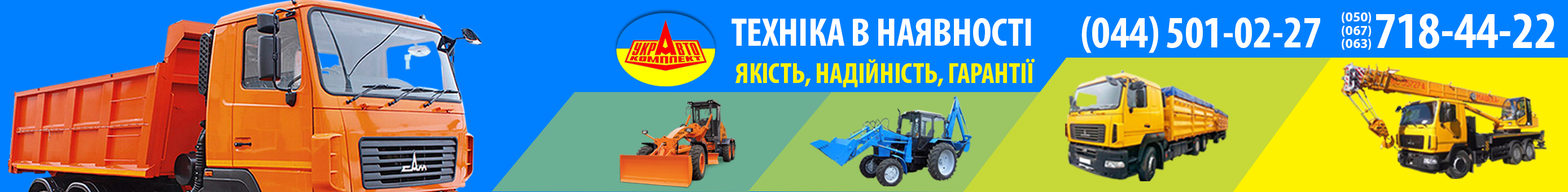
<style>
.page{position:relative;width:1568px;height:192px;background:#0080ff}
.page>*{position:absolute;margin:0}
.t1{font:44.8px "MyriadPro-BoldCond";letter-spacing:-0.01em;color:#fefefe}
.t2{font:13.5px "MyriadPro-Bold";color:#fdfcfc}
.t3{font:13.5px "MyriadPro-Bold";color:#ffffff}
.t4{font:52.1px "MyriadPro-BoldCond";letter-spacing:-0.01em;color:#ffffff}
.t5{font:40.4px "MyriadPro-BoldCond";letter-spacing:-0.01em;color:#ffffff}
.t6{font:28.7px "MyriadPro-BoldCond";letter-spacing:-0.01em;color:#fff200}
</style>
<div class="page">
<p class="t1" style="left:1081px;top:16px;width:239px;height:37px">(044) 501-02-27</p>
<p class="t2" style="left:1342px;top:12px;width:29px;height:11px">(050<span class="t3">)</span></p>
<p class="t4" style="left:1376px;top:14px;width:178px;height:35px">718-44-22</p>
<p class="t5" style="left:732px;top:18px;width:299px;height:28px">ТЕХНІКА В НАЯВНОСТІ</p>
<p class="t3" style="left:1342px;top:25px;width:29px;height:12px">(067)</p>
<p class="t3" style="left:1342px;top:38px;width:29px;height:12px">(063)</p>
<p class="t6" style="left:735px;top:59px;width:300px;height:28px">ЯКІСТЬ, НАДІЙНІСТЬ, ГАРАНТІЇ</p>
</div>
